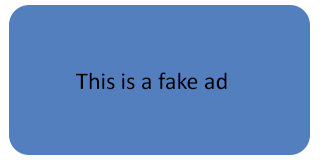
<style>
.page{position:relative;width:320px;height:160px;background:#537fbe}
.page>*{position:absolute;margin:0}
.t1{font:24px "Calibri";color:#020000}
</style>
<div class="page">
<p class="t1" style="left:76px;top:72px;width:151px;height:18px">This is a fake ad</p>
</div>
